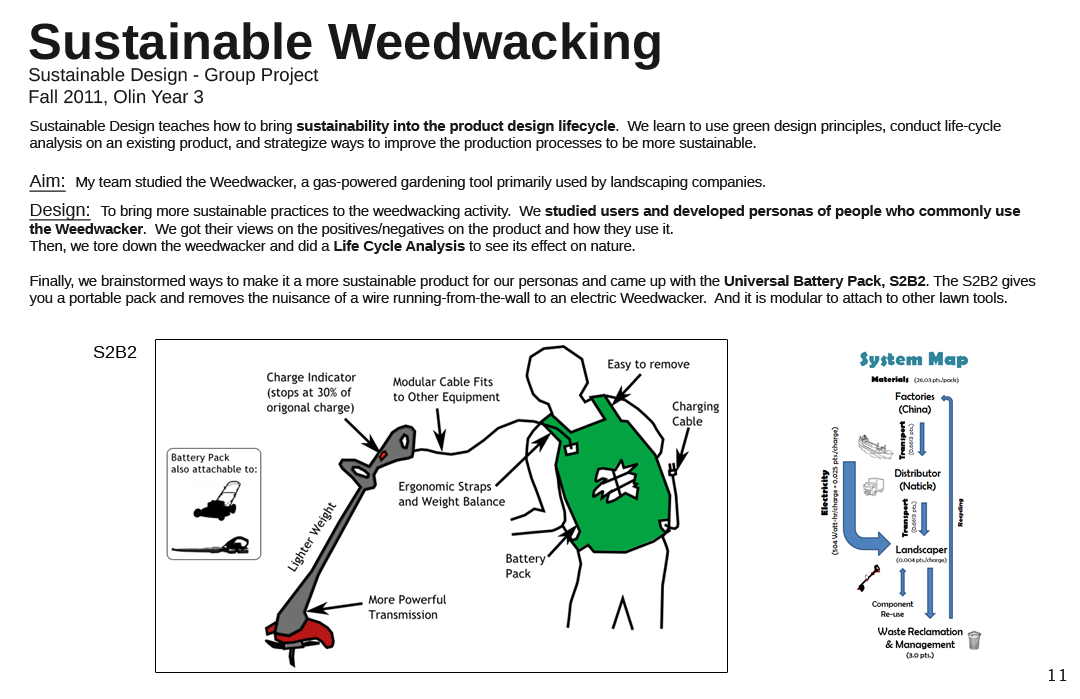
<style>
.page{position:relative;width:1080px;height:699px;background:#ffffff}
.page>*{position:absolute;margin:0}
.t1{font:18.5px "LiberationSans";color:#191717}
.t2{font:50.9px "LiberationSans-Bold";color:#191717}
.t3{font:14.5px "LiberationSans";color:#191717}
.t4{font:14.5px "LiberationSans-Bold";color:#191717}
.t5{font:18px "LiberationSans";color:#191717;text-decoration:underline}
.t6{font:18px "LiberationSans";color:#020202}
.t7{font:18px "BookmanOldStyle";color:#191717}
</style>
<div class="page">
<p class="t1" style="left:29px;top:22px;width:631px;height:84px"><span class="t2">Sustainable Weedwacking<br></span>Sustainable Design - Group Project<br>Fall 2011, Olin Year 3</p>
<p class="t3" style="left:29px;top:120px;width:1007px;height:186px">Sustainable Design teaches how to bring <span class="t4">sustainability into the product design lifecycle</span>.  We learn to use green design principles, conduct life-cycle analysis on an existing product, and strategize ways to improve the production processes to be more sustainable.<br><br><span class="t5">Aim:  </span>My team studied the Weedwacker, a gas-powered gardening tool primarily used by landscaping companies.  <br><br><span class="t5">Design:  </span>To bring more sustainable practices to the weedwacking activity.  We <span class="t4">studied users and developed personas of people who commonly use the Weedwacker</span>.  We got their views on the positives/negatives on the product and how they use it.  <br>Then, we tore down the weedwacker and did a <span class="t4">Life Cycle Analysis</span> to see its effect on nature.  <br><br>Finally, we brainstormed ways to make it a more sustainable product for our personas and came up with the <span class="t4">Universal Battery Pack, S2B2</span>. The S2B2 gives you a portable pack and removes the nuisance of a wire running-from-the-wall to an electric Weedwacker.  And it is modular to attach to other lawn tools.</p>
<p class="t6" style="left:94px;top:346px;width:43px;height:12px">S2B2</p>
<p class="t7" style="left:1048px;top:669px;width:19px;height:12px">11</p>
</div>
